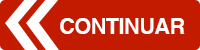
<style>
.page{position:relative;width:200px;height:50px;background:#c21b00}
.page>*{position:absolute;margin:0}
.t1{font:21.7px "Helvetica-Bold";letter-spacing:-0.025em;color:#ffffff}
</style>
<div class="page">
<p class="t1" style="left:60px;top:18px;width:125px;height:16px">CONTINUAR</p>
</div>
